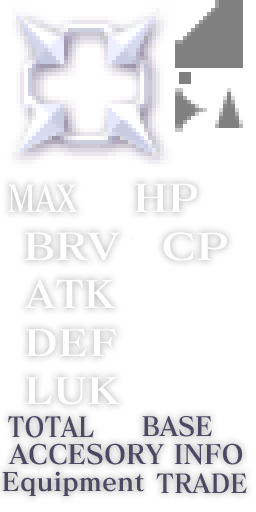
<style>
.page{position:relative;width:256px;height:512px;background:#ffffff}
.page>*{position:absolute;margin:0}
.t1{font:36.9px "MatisseElegantoPro-BEdit";color:#ffffff;scale:0.8 1}
.t2{font:37.8px "MatisseElegantoPro-BEdit";color:#ffffff;scale:1.14 1}
.t3{font:36.7px "MatisseElegantoPro-BEdit";color:#ffffff;scale:1.21 1}
.t4{font:36.4px "MatisseElegantoPro-BEdit";color:#ffffff;scale:1.27 1}
.t5{font:37.7px "MatisseElegantoPro-BEdit";color:#ffffff;scale:1.08 1}
.t6{font:36px "MatisseElegantoPro-BEdit";color:#ffffff;scale:1.2 1}
.t7{font:27.5px "MatisseElegantoPro-BEdit";color:#4b4861;scale:0.86 1}
.t8{font:26.4px "MatisseElegantoPro-BEdit";color:#4b4861;scale:0.96 1}
.t9{font:26.6px "MatisseElegantoPro-BEdit";color:#4b4861}
.t10{font:25.4px "MatisseElegantoPro-BEdit";color:#4b4861}
.t11{font:26px "MatisseElegantoPro-BEdit";color:#4b4861;scale:0.96 1}
</style>
<div class="page">
<p class="t1" style="left:8px;top:184px;width:70px;height:28px">MAX</p>
<p class="t2" style="left:134px;top:183px;width:63px;height:29px">HP</p>
<p class="t3" style="left:24px;top:232px;width:97px;height:29px">BRV</p>
<p class="t4" style="left:163px;top:232px;width:64px;height:29px">CP</p>
<p class="t5" style="left:24px;top:279px;width:92px;height:29px">ATK</p>
<p class="t6" style="left:25px;top:328px;width:92px;height:29px">DEF</p>
<p class="t6" style="left:25px;top:377px;width:96px;height:28px">LUK</p>
<p class="t7" style="left:8px;top:416px;width:86px;height:22px">TOTAL</p>
<p class="t8" style="left:142px;top:416px;width:70px;height:21px">BASE</p>
<p class="t9" style="left:8px;top:443px;width:234px;height:22px">ACCESORY INFO</p>
<p class="t10" style="left:2px;top:471px;width:143px;height:25px">Equipment</p>
<p class="t11" style="left:156px;top:473px;width:91px;height:21px">TRADE</p>
</div>
